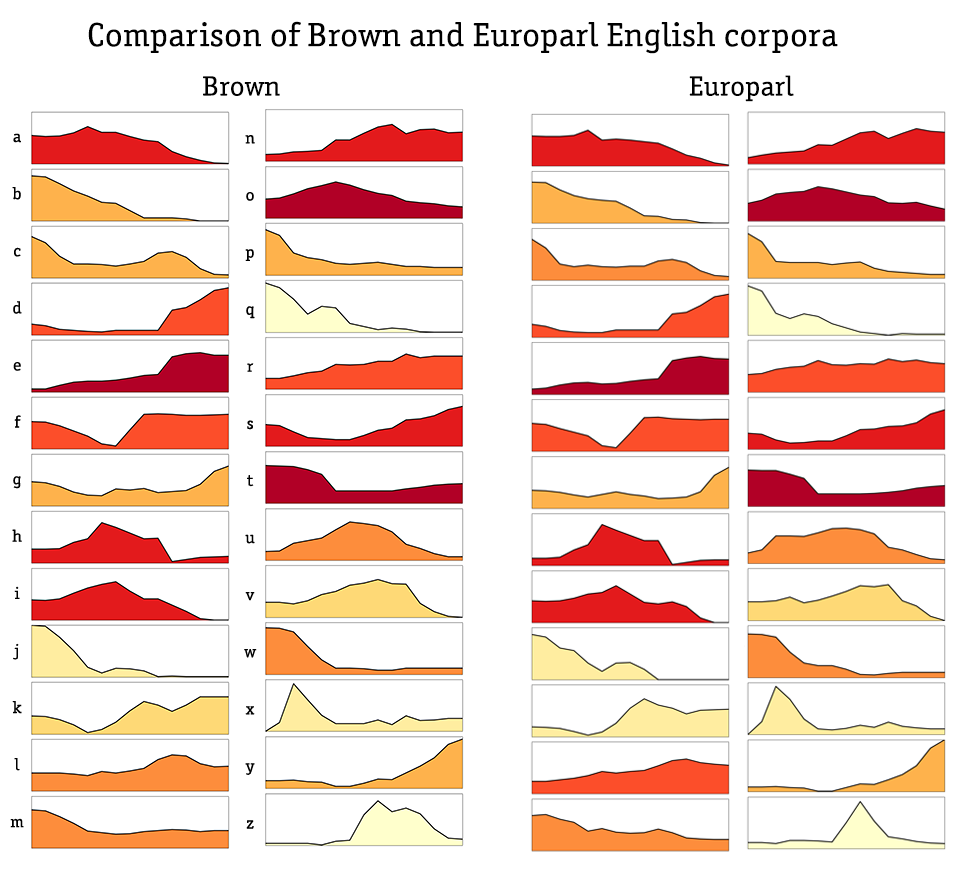
<style>
.page{position:relative;width:966px;height:870px;background:#ffffff}
.page>*{position:absolute;margin:0}
.t1{font:33.5px "OfficinaSerITCStd-Book";letter-spacing:0.01em;color:#000000;scale:1.08 1}
.t2{font:27.9px "OfficinaSerITCStd-Book";letter-spacing:0.01em;color:#000000;scale:1.08 1}
</style>
<div class="page">
<p class="t1" style="left:88px;top:21px;width:750px;height:33px">Comparison of Brown and Europarl English corpora</p>
<p class="t2" style="left:203px;top:75px;width:591px;height:27px">Brown                                                               Europarl</p>
</div>
